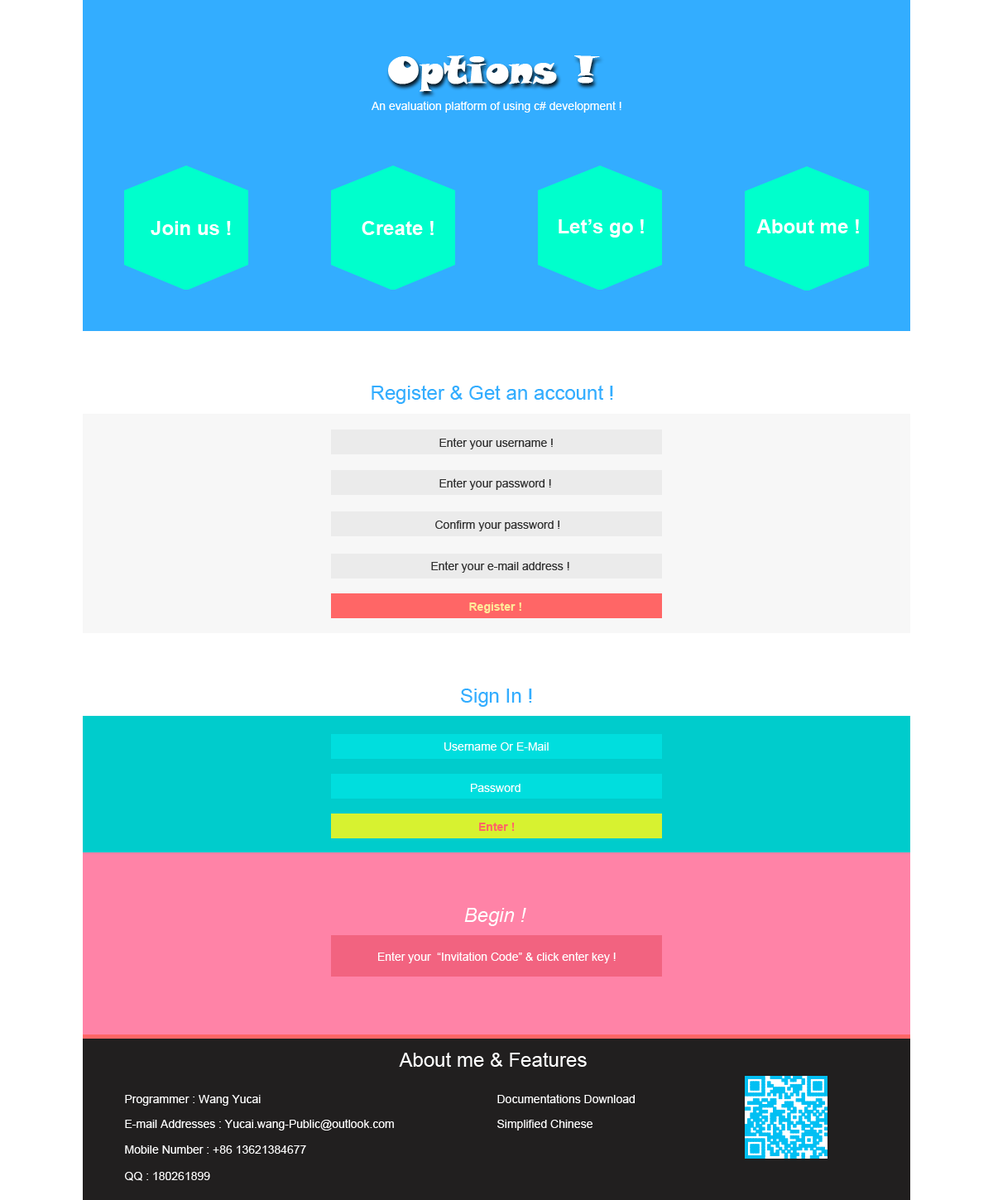
<style>
.page{position:relative;width:993px;height:1200px;background:#ffffff}
.page>*{position:absolute;margin:0}
.t1{font:19.9px "Arial-BoldMT";color:#ffffff}
.t2{font:19.9px "ArialMT";color:#33adff}
.t3{font:11.6px "ArialMT";color:#303030}
.t4{font:11.6px "Arial-BoldMT";color:#ffea99}
.t5{font:11.6px "ArialMT";color:#ffffff}
.t6{font:11.6px "Arial-BoldMT";color:#ff6666}
.t7{font:19.9px "Arial-ItalicMT";color:#ffffff}
.t8{font:19.9px "ArialMT";color:#ffffff}
</style>
<div class="page">
<p class="t1" style="left:151px;top:221px;width:80px;height:14px">Join us !</p>
<p class="t1" style="left:362px;top:221px;width:72px;height:14px">Create !</p>
<p class="t1" style="left:559px;top:219px;width:85px;height:19px">Let’s go !</p>
<p class="t1" style="left:757px;top:219px;width:102px;height:14px">About me !</p>
<p class="t2" style="left:372px;top:385px;width:241px;height:19px">Register &amp; Get an account !</p>
<p class="t3" style="left:440px;top:438px;width:113px;height:12px">Enter your username !</p>
<p class="t3" style="left:440px;top:478px;width:111px;height:12px">Enter your password !</p>
<p class="t3" style="left:435px;top:521px;width:125px;height:10px">Confirm your password !</p>
<p class="t3" style="left:431px;top:561px;width:139px;height:12px">Enter your e-mail address !</p>
<p class="t4" style="left:469px;top:603px;width:53px;height:10px">Register !</p>
<p class="t2" style="left:461px;top:689px;width:71px;height:18px">Sign In !</p>
<p class="t5" style="left:445px;top:743px;width:104px;height:8px">Username Or E-Mail</p>
<p class="t5" style="left:471px;top:784px;width:50px;height:8px">Password</p>
<p class="t6" style="left:479px;top:823px;width:36px;height:8px">Enter !</p>
<p class="t7" style="left:464px;top:908px;width:63px;height:18px">Begin !</p>
<p class="t5" style="left:378px;top:952px;width:238px;height:12px">Enter your  “Invitation Code” &amp; click enter key !</p>
<p class="t8" style="left:399px;top:1052px;width:188px;height:15px">About me &amp; Features</p>
<p class="t5" style="left:125px;top:1095px;width:136px;height:11px">Programmer : Wang Yucai</p>
<p class="t5" style="left:498px;top:1094px;width:137px;height:10px">Documentations Download</p>
<p class="t5" style="left:125px;top:1119px;width:269px;height:12px">E-mail Addresses : Yucai.wang-Public@outlook.com</p>
<p class="t5" style="left:498px;top:1120px;width:95px;height:11px">Simplified Chinese</p>
<p class="t5" style="left:125px;top:1146px;width:181px;height:8px">Mobile Number : +86 13621384677</p>
<p class="t5" style="left:125px;top:1172px;width:85px;height:9px">QQ : 180261899</p>
</div>
